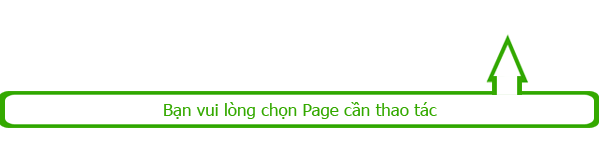
<style>
.page{position:relative;width:600px;height:150px;background:#ffffff}
.page>*{position:absolute;margin:0}
.t1{font:17px "Tahoma";color:#34a900}
</style>
<div class="page">
<p class="t1" style="left:164px;top:102px;width:273px;height:17px">Bạn vui lòng chọn Page cần thao tác</p>
</div>
